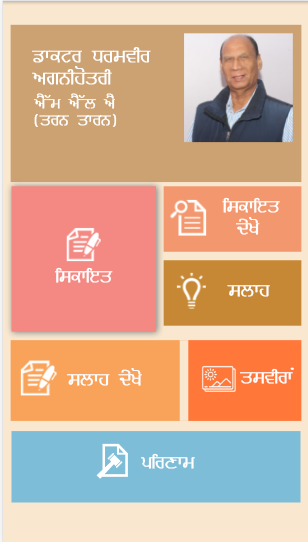
<style>
.page{position:relative;width:308px;height:542px}
.page>*{position:absolute;margin:0}
.t1{font:18px "Bulara_Demi-Bold";color:#ffffff}
.t2{font:14px "Bulara_Demi-Bold";color:#ffffff}
.t3{font:14.9px "Bulara_Demi-Bold";color:#ffffff}
.t4{font:17px "Bulara_Demi-Bold";color:#ffffff}
</style>
<div class="page">
<p class="t1" style="left:32px;top:47px;width:119px;height:16px">ਡਾਕਟਰ ਧਰਮਵੀਰ</p>
<p class="t1" style="left:32px;top:66px;width:80px;height:19px">ਅਗਨੀਹੋਤਰੀ</p>
<p class="t2" style="left:34px;top:93px;width:81px;height:16px">ਐੱਮ ਐੱਲ ਐ</p>
<p class="t3" style="left:34px;top:113px;width:83px;height:14px">(ਤਰਨ ਤਾਰਨ)</p>
<p class="t4" style="left:222px;top:197px;width:58px;height:16px">ਿਸਕਾਇਤ</p>
<p class="t4" style="left:236px;top:217px;width:24px;height:18px">ਦੇਖੋ</p>
<p class="t4" style="left:55px;top:267px;width:58px;height:16px">ਿਸਕਾਇਤ</p>
<p class="t4" style="left:227px;top:285px;width:43px;height:12px">ਸਲਾਹ</p>
<p class="t4" style="left:67px;top:368px;width:75px;height:18px">ਸਲਾਹ ਦੇਖੋ</p>
<p class="t4" style="left:240px;top:367px;width:54px;height:17px">ਤਸਵੀਰਾਂ</p>
<p class="t4" style="left:141px;top:453px;width:54px;height:16px">ਪਿਰਣਾਮ</p>
</div>
